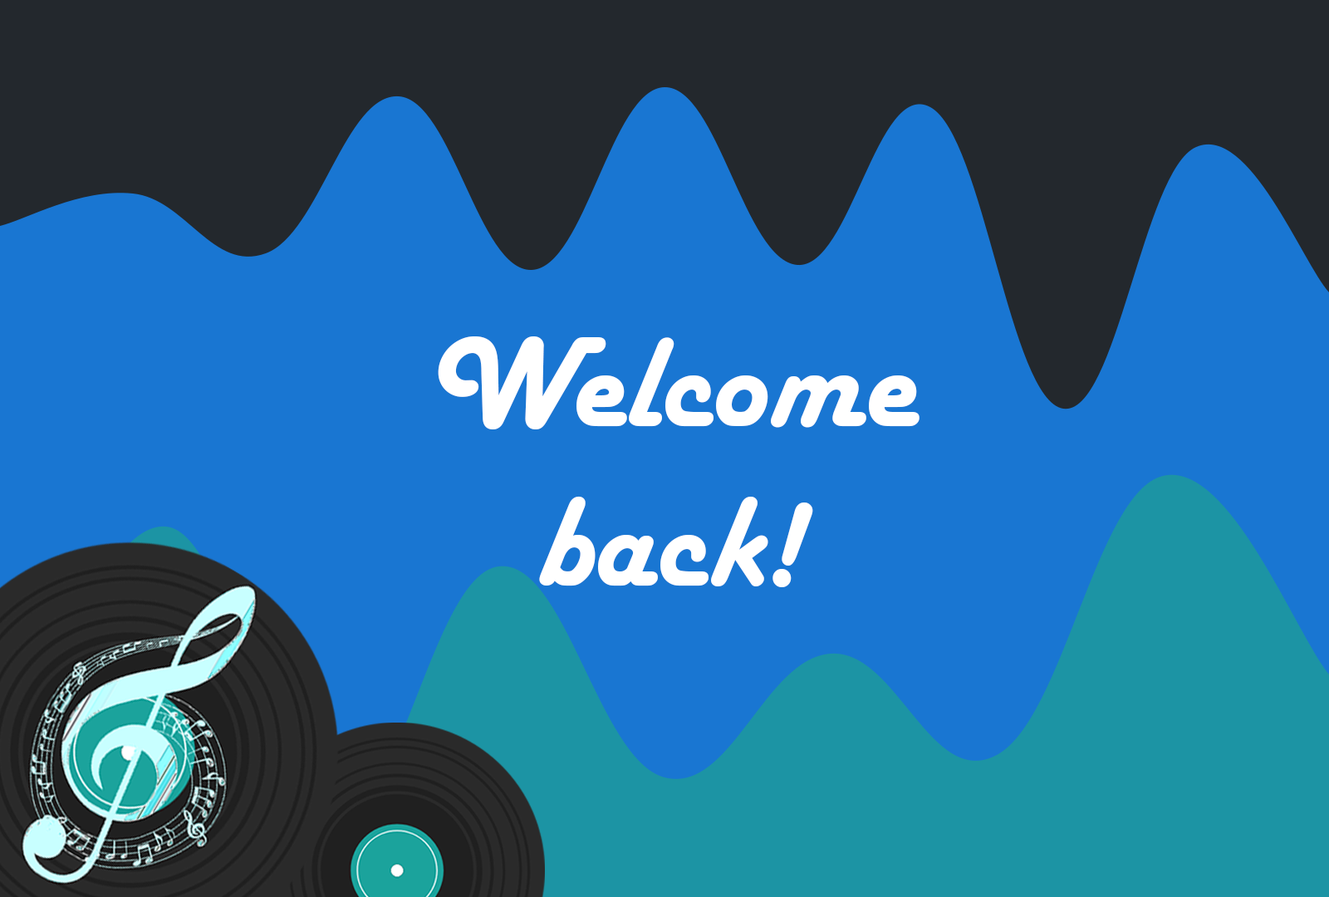
<style>
.page{position:relative;width:1329px;height:897px;background:#1976d2}
.page>*{position:absolute;margin:0}
.t1{font:132.9px "HarlowSolidPlain";color:#ffffff}
</style>
<div class="page">
<p class="t1" style="left:438px;top:336px;width:482px;height:251px;text-align:center">Welcome back!</p>
</div>
